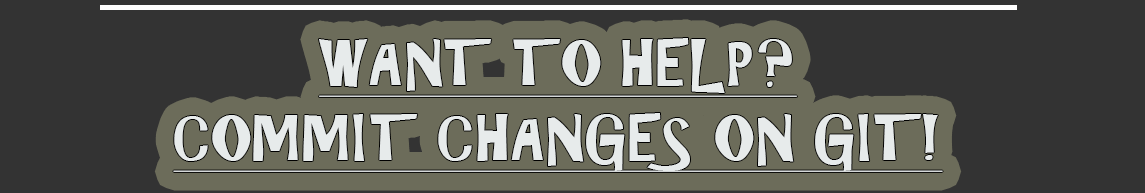
<style>
.page{position:relative;width:1145px;height:193px;background:#333333}
.page>*{position:absolute;margin:0}
.t1{font:58.3px/75px "ARCHRISTY";color:#e7ebeb;text-decoration:underline;scale:1.13 1}
</style>
<div class="page">
<p class="t1" style="left:173px;top:38px;width:770px;height:134px;text-align:center">WANT TO HELP?<br>COMMIT CHANGES ON GIT!</p>
</div>
